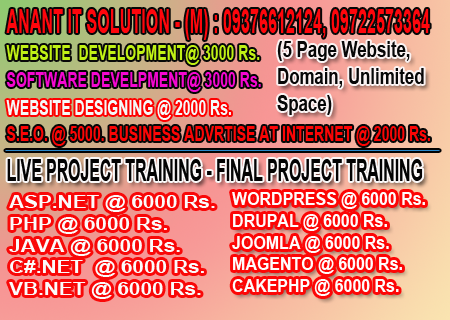
<style>
.page{position:relative;width:450px;height:320px}
.page>*{position:absolute;margin:0}
.t1{font:33.5px "Arial-BoldMT";color:#ff060c;scale:0.48 1}
.t2{font:22.4px "Arial-BoldMT";color:#070707;scale:0.75 1}
.t3{font:21.4px "Arial-BoldMT";color:#c0f115;scale:0.66 1}
.t4{font:21.4px "Arial-BoldMT";color:#f408d0;scale:0.66 1}
.t5{font:21.4px "Arial-BoldMT";color:#f5f9f9;scale:0.66 1}
.t6{font:21.4px "Arial-BoldMT";color:#fc0505;scale:0.66 1}
.t7{font:31.4px "Arial-BoldMT";color:#030303;scale:0.5 1}
.t8{font:18px "Arial-BoldMT";color:#fbfbfb;scale:1.16 1}
.t9{font:18px "Arial-BoldMT";color:#fffcfc;scale:0.89 1}
</style>
<div class="page">
<p class="t1" style="left:6px;top:9px;width:424px;height:31px">ANANT IT SOLUTION - (M) : 09376612124, 09722573364</p>
<p class="t2" style="left:277px;top:41px;width:147px;height:74px">(5 Page Website,<br>Domain, Unlimited <br>Space)</p>
<p class="t3" style="left:6px;top:45px;width:254px;height:20px">WEBSITE  DEVELOPMENT@ 3000 Rs.</p>
<p class="t4" style="left:6px;top:72px;width:255px;height:20px">SOFTWARE DEVELPMENT@ 3000 Rs.</p>
<p class="t5" style="left:6px;top:100px;width:225px;height:20px">WEBSITE DESIGNING @ 2000 Rs.</p>
<p class="t6" style="left:6px;top:126px;width:424px;height:20px">S.E.O. @ 5000. BUSINESS ADVRTISE AT INTERNET @ 2000 Rs.</p>
<p class="t7" style="left:7px;top:159px;width:416px;height:22px">LIVE PROJECT TRAINING - FINAL PROJECT TRAINING</p>
<p class="t8" style="left:9px;top:195px;width:206px;height:104px">ASP.NET @ 6000 Rs.<br>PHP @ 6000 Rs.<br>JAVA @ 6000 Rs.<br>C#.NET  @ 6000 Rs.<br>VB.NET @ 6000 Rs.</p>
<p class="t9" style="left:232px;top:192px;width:193px;height:104px">WORDPRESS @ 6000 Rs.<br>DRUPAL @ 6000 Rs.<br>JOOMLA @ 6000 Rs.<br>MAGENTO @ 6000 Rs.<br>CAKEPHP @ 6000 Rs.</p>
</div>
